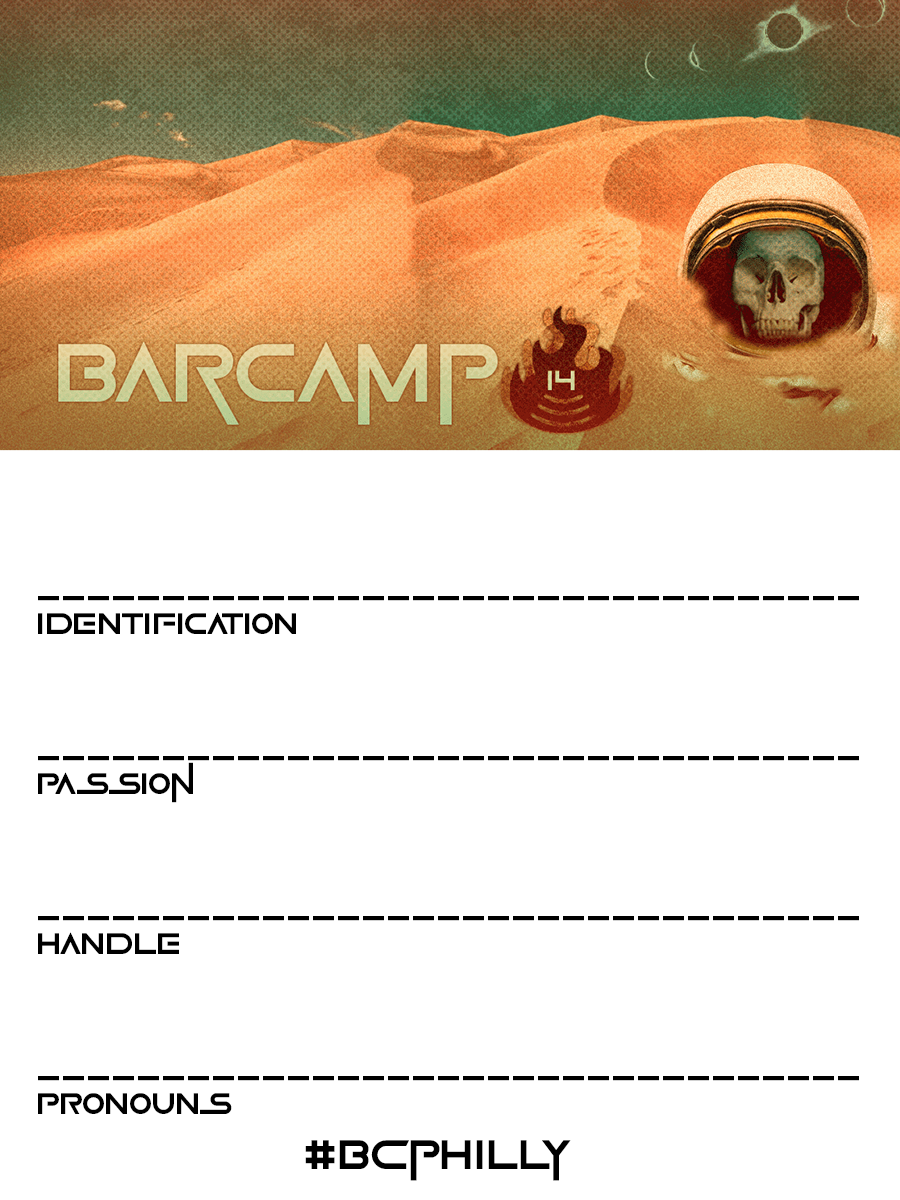
<style>
.page{position:relative;width:900px;height:1200px;background:#ffffff}
.page>*{position:absolute;margin:0}
.t1{font:33.3px "GameOfSquids";color:#000000}
.t2{font:45.8px "GameOfSquids";color:#000000}
</style>
<div class="page">
<p class="t1" style="left:38px;top:596px;width:821px;height:585px">_________________________________<br>IDENTIFICATION<br><br><br>_________________________________<br>Passion<br><br><br>_________________________________<br>HANDLE<br><br><br>_________________________________<br>PRONOUNS<br>                <span class="t2">#bcphilly</span></p>
</div>
